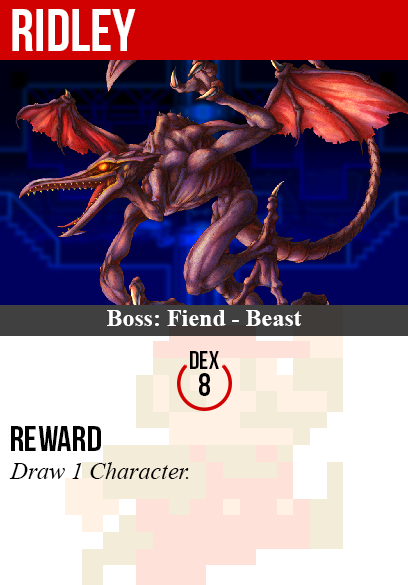
<style>
.page{position:relative;width:408px;height:585px;background:#ffffff}
.page>*{position:absolute;margin:0}
.t1{font:60px "BebasNeue";color:#ffffff}
.t2{font:24px "TimesNewRomanPS-BoldMT";color:#ffffff}
.t3{font:25px "BebasNeue";color:#000000}
.t4{font:32px "BebasNeue";color:#000000}
.t5{font:36px "BebasNeue";color:#000000}
.t6{font:24px "TimesNewRomanPS-ItalicMT";color:#000000}
</style>
<div class="page">
<p class="t1" style="left:12px;top:9px;width:124px;height:42px">ridley</p>
<p class="t2" style="left:107px;top:310px;width:195px;height:16px">Boss: Fiend - Beast</p>
<p class="t3" style="left:190px;top:351px;width:29px;height:18px">dex</p>
<p class="t4" style="left:199px;top:373px;width:11px;height:23px">8</p>
<p class="t5" style="left:11px;top:426px;width:90px;height:25px">reward</p>
<p class="t6" style="left:9px;top:462px;width:180px;height:17px">Draw 1 Character.</p>
</div>
